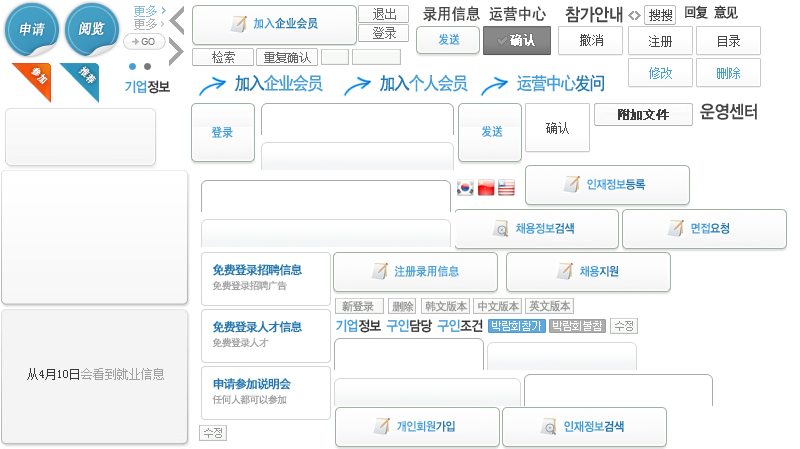
<style>
.page{position:relative;width:800px;height:449px;background:#ffffff}
.page>*{position:absolute;margin:0}
.t1{font:12px "SimSun";color:#89bde0}
.t2{font:16px "SimHei";color:#454545;scale:0.9 1}
.t3{font:18px "YDIYGO140-KSCpc-EUC-H";letter-spacing:-0.1em;color:#454545;scale:0.9 1}
.t4{font:14px "SimHei";letter-spacing:-0.1em;color:#3b3b3b;font-weight:bold;scale:0.9 1}
.t5{font:12px "SimHei";color:#2677ae;scale:0.9 1}
.t6{font:12px "SimHei";color:#469ed9;scale:0.9 1}
.t7{font:12px "SimSun";color:#666666}
.t8{font:12px "SimSun";color:#464646}
.t9{font:14px "SimHei";color:#ffffff;font-weight:bold;font-style:italic;scale:0.9 1}
.t10{font:12px "SimSun";color:#abb0b5}
.t11{font:12px "SimSun";color:#ffffff;font-weight:bold}
.t12{font:12px "SimSun";color:#454545}
.t13{font:12px "MicrosoftYaHei";color:#666666}
.t14{font:10px "SimHei";letter-spacing:-0.05em;color:#ffffff;font-weight:bold;scale:0.9 1}
.t15{font:18px "SimHei";letter-spacing:-0.1em;color:#469ed9;scale:0.9 1}
.t16{font:18px "SimHei";letter-spacing:-0.1em;color:#2479b2;scale:0.9 1}
.t17{font:12px "SimSun";color:#469ed9}
.t18{font:14px "YDIYGO130-KSCpc-EUC-H";letter-spacing:-0.1em;color:#469ed9;scale:0.9 1}
.t19{font:14px "YDIYGO130-KSCpc-EUC-H";letter-spacing:-0.1em;color:#333333;scale:0.9 1}
.t20{font:12px "MicrosoftYaHei";color:#3e3c3e;font-weight:bold}
.t21{font:12px "SimHei";letter-spacing:-0.1em;color:#2476ad;font-weight:bold}
.t22{font:10px "SimHei";letter-spacing:-0.1em;color:#a1a1a1;font-weight:bold}
.t23{font:11px "SimHei";letter-spacing:-0.05em;color:#969696}
.t24{font:12px "SimHei";letter-spacing:-0.05em;color:#969696;scale:0.9 1}
.t25{font:12px "SimSun";color:#a0a0a0}
.t26{font:12px "SimSun";color:#373737}
</style>
<div class="page">
<p class="t1" style="left:134px;top:5px;width:23px;height:12px">更多</p>
<p class="t2" style="left:423px;top:6px;width:57px;height:16px">录用信息</p>
<p class="t2" style="left:489px;top:6px;width:57px;height:16px">运营中心</p>
<p class="t3" style="left:565px;top:6px;width:58px;height:17px">참가안내</p>
<p class="t4" style="left:685px;top:5px;width:23px;height:14px">回复</p>
<p class="t4" style="left:714px;top:5px;width:24px;height:14px">意见</p>
<p class="t5" style="left:253px;top:17px;width:65px;height:12px"><span class="t6">加入</span>企业会员</p>
<p class="t7" style="left:373px;top:8px;width:23px;height:12px">退出</p>
<p class="t8" style="left:649px;top:9px;width:23px;height:12px">搜搜</p>
<p class="t9" style="left:19px;top:22px;width:26px;height:14px">申请</p>
<p class="t9" style="left:78px;top:21px;width:27px;height:15px">阅览</p>
<p class="t10" style="left:134px;top:18px;width:23px;height:12px">更多</p>
<p class="t7" style="left:373px;top:27px;width:23px;height:12px">登录</p>
<p class="t6" style="left:438px;top:33px;width:22px;height:12px">发送</p>
<p class="t11" style="left:510px;top:34px;width:25px;height:12px">确认</p>
<p class="t12" style="left:580px;top:34px;width:23px;height:12px">撤消</p>
<p class="t12" style="left:649px;top:35px;width:23px;height:12px">注册</p>
<p class="t12" style="left:718px;top:35px;width:22px;height:12px">目录</p>
<p class="t7" style="left:212px;top:51px;width:23px;height:12px">检索</p>
<p class="t13" style="left:264px;top:52px;width:47px;height:11px">重复确认</p>
<p class="t14" style="left:31px;top:67px;width:17px;height:18px;rotate:45deg">参加</p>
<p class="t14" style="left:78px;top:66px;width:18px;height:18px;rotate:45deg">推荐</p>
<p class="t15" style="left:235px;top:74px;width:88px;height:18px"><span class="t16">加入</span>企业会员</p>
<p class="t15" style="left:380px;top:74px;width:88px;height:18px"><span class="t16">加入</span>个人会员</p>
<p class="t15" style="left:517px;top:74px;width:87px;height:18px">运营中心<span class="t16">发问</span></p>
<p class="t17" style="left:649px;top:67px;width:23px;height:12px">修改</p>
<p class="t17" style="left:717px;top:67px;width:23px;height:12px">删除</p>
<p class="t18" style="left:125px;top:80px;width:45px;height:14px">기업<span class="t19">정보</span></p>
<p class="t20" style="left:618px;top:109px;width:51px;height:11px">附加文件</p>
<p class="t6" style="left:211px;top:126px;width:22px;height:12px">登录</p>
<p class="t6" style="left:481px;top:125px;width:22px;height:12px">发送</p>
<p class="t12" style="left:546px;top:122px;width:23px;height:12px">确认</p>
<p class="t21" style="left:213px;top:264px;width:89px;height:12px">免费登录招聘信息</p>
<p class="t6" style="left:394px;top:265px;width:65px;height:12px">注册录用信息</p>
<p class="t22" style="left:212px;top:280px;width:75px;height:11px">免费登录招聘广告</p>
<p class="t23" style="left:342px;top:301px;width:32px;height:11px">新登录</p>
<p class="t23" style="left:392px;top:301px;width:22px;height:11px">删除</p>
<p class="t23" style="left:425px;top:301px;width:42px;height:11px">韩文版本</p>
<p class="t23" style="left:478px;top:301px;width:41px;height:11px">中文版本</p>
<p class="t24" style="left:529px;top:300px;width:42px;height:12px">英文版本</p>
<p class="t21" style="left:213px;top:321px;width:89px;height:12px">免费登录人才信息</p>
<p class="t22" style="left:212px;top:337px;width:57px;height:11px">免费登录人才</p>
<p class="t25" style="left:27px;top:368px;width:137px;height:12px"><span class="t26">从4月10日</span>会看到就业信息</p>
<p class="t21" style="left:213px;top:378px;width:78px;height:12px">申请参加说明会</p>
<p class="t22" style="left:212px;top:394px;width:75px;height:11px">任何人都可以参加</p>
</div>
